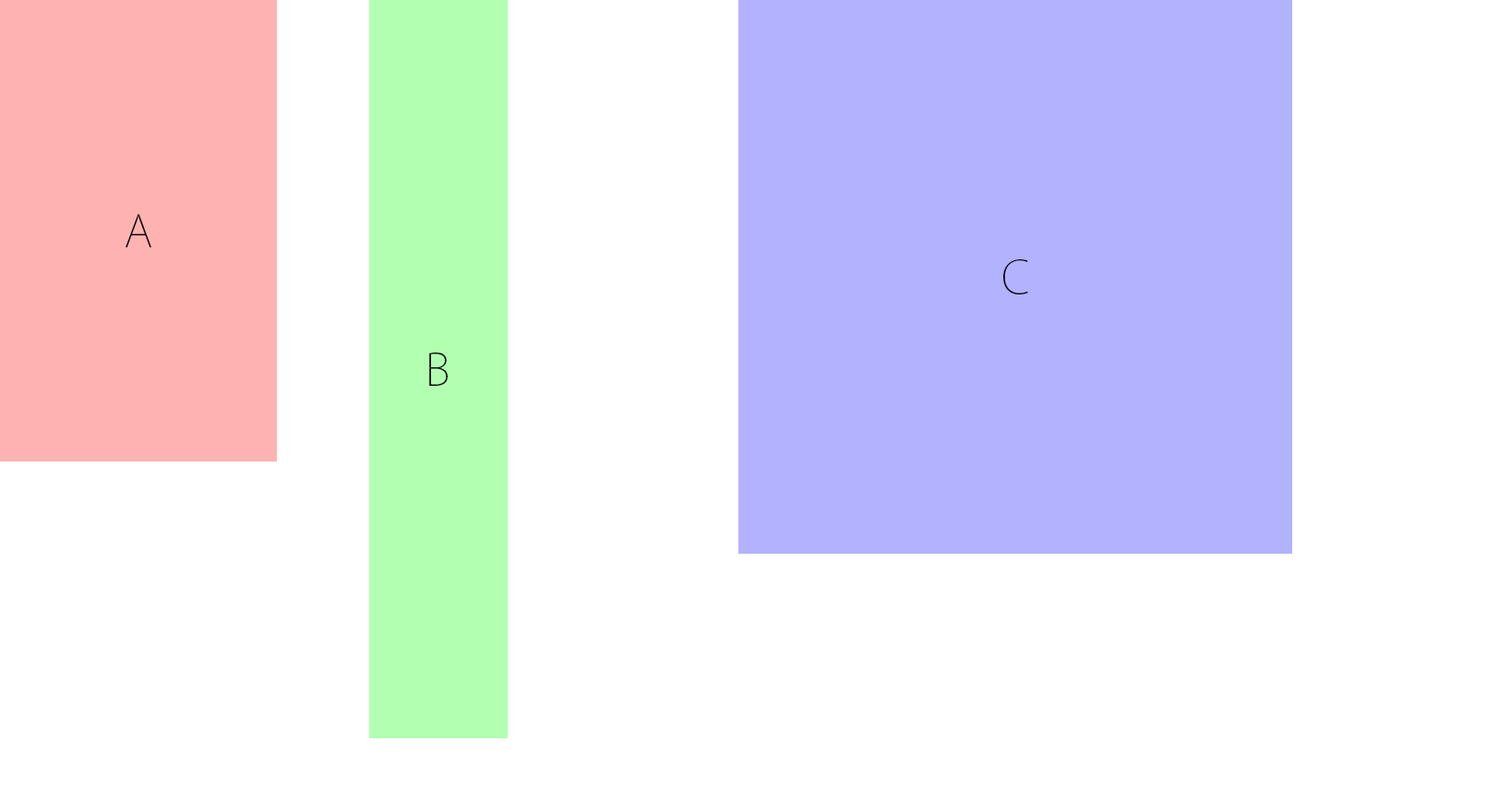
<style>
.page{position:relative;width:1510px;height:790px;background:#ffffff}
.page>*{position:absolute;margin:0}
.t1{font:44.3px "KozGoPro-ExtraLight";color:#000000}
</style>
<div class="page">
<p class="t1" style="left:125px;top:214px;width:26px;height:33px">A</p>
<p class="t1" style="left:1003px;top:259px;width:25px;height:35px">C</p>
<p class="t1" style="left:429px;top:352px;width:19px;height:34px">B</p>
</div>
